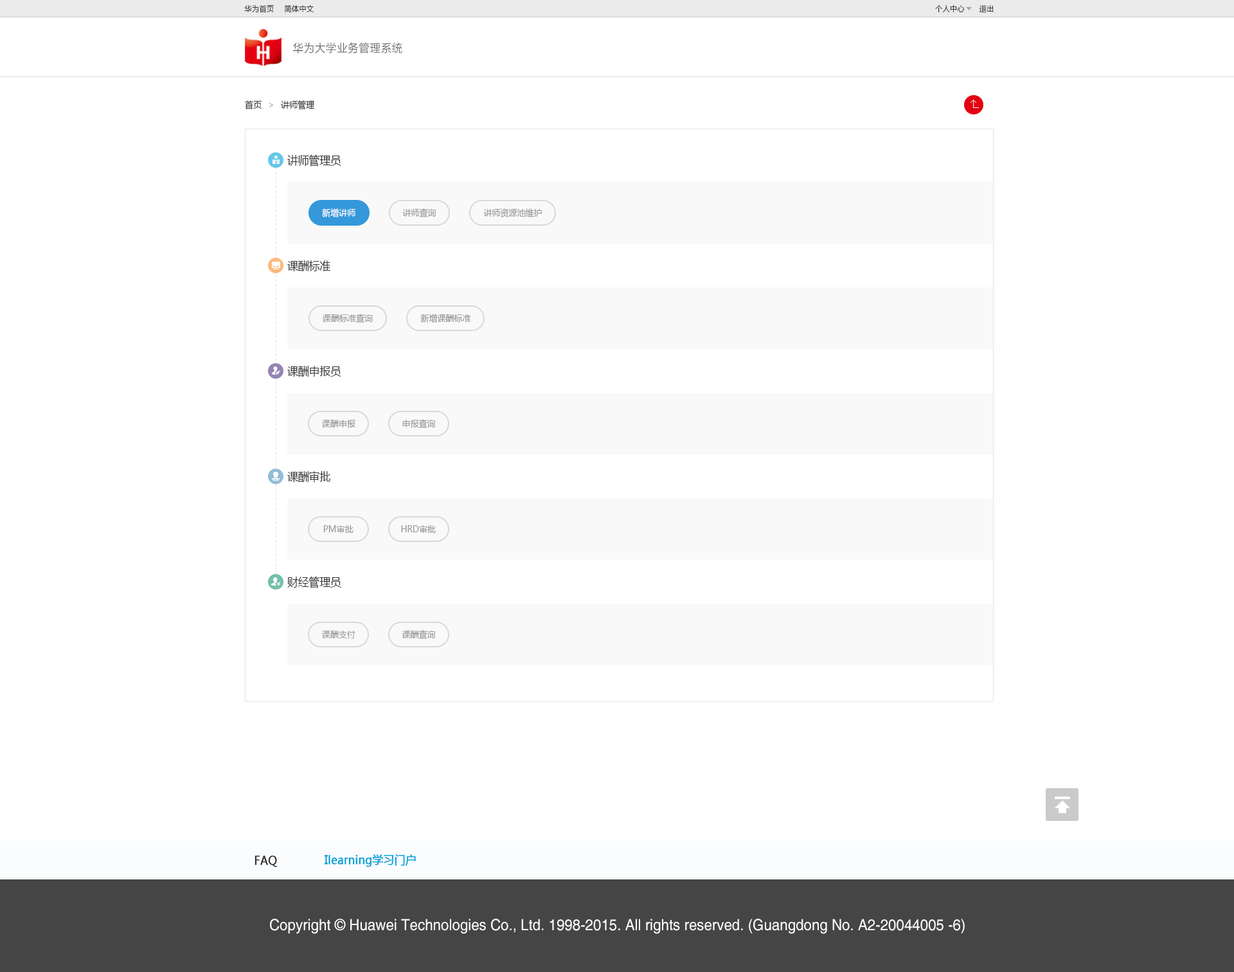
<style>
.page{position:relative;width:1234px;height:972px;background:#ffffff}
.page>*{position:absolute;margin:0}
.t1{font:7.7px "MicrosoftYaHei";letter-spacing:0.025em;color:#333333;scale:0.93 1}
.t2{font:11.6px "FZLTXHK";letter-spacing:0.025em;color:#666666;scale:0.93 1}
.t3{font:9px "MicrosoftYaHei";color:#333333;scale:0.93 1}
.t4{font:11.6px "MicrosoftYaHei";color:#333333;scale:0.93 1}
.t5{font:9px "MicrosoftYaHei";color:#ffffff;scale:0.93 1}
.t6{font:9px "MicrosoftYaHei";color:#999999;scale:0.93 1}
.t7{font:11.6px "MicrosoftYaHei";color:#333333;font-weight:bold;scale:0.93 1}
.t8{font:11.6px "MicrosoftYaHei";color:#00a1d9;font-weight:bold;scale:0.93 1}
.t9{font:15.4px "Helvetica";color:#fffefe;scale:0.93 1}
</style>
<div class="page">
<p class="t1" style="left:244px;top:5px;width:30px;height:8px">华为首页</p>
<p class="t1" style="left:284px;top:4px;width:30px;height:9px">简体中文</p>
<p class="t1" style="left:935px;top:5px;width:30px;height:7px">个人中心</p>
<p class="t1" style="left:979px;top:5px;width:15px;height:8px">退出</p>
<p class="t2" style="left:293px;top:42px;width:109px;height:11px">华为大学业务管理系统</p>
<p class="t3" style="left:245px;top:100px;width:17px;height:9px">首页</p>
<p class="t3" style="left:281px;top:100px;width:34px;height:10px">讲师管理</p>
<p class="t4" style="left:287px;top:154px;width:54px;height:12px">讲师管理员</p>
<p class="t5" style="left:322px;top:208px;width:34px;height:9px">新增讲师</p>
<p class="t6" style="left:402px;top:208px;width:34px;height:9px">讲师查询</p>
<p class="t6" style="left:483px;top:208px;width:59px;height:10px">讲师资源池维护</p>
<p class="t4" style="left:287px;top:260px;width:43px;height:11px">课酬标准</p>
<p class="t6" style="left:322px;top:314px;width:51px;height:9px">课酬标准查询</p>
<p class="t6" style="left:420px;top:314px;width:51px;height:9px">新增课酬标准</p>
<p class="t4" style="left:287px;top:366px;width:54px;height:11px">课酬申报员</p>
<p class="t6" style="left:321px;top:420px;width:35px;height:8px">课酬申报</p>
<p class="t6" style="left:402px;top:419px;width:33px;height:9px">申报查询</p>
<p class="t4" style="left:287px;top:471px;width:43px;height:11px">课酬审批</p>
<p class="t6" style="left:323px;top:525px;width:31px;height:8px">PM审批</p>
<p class="t6" style="left:401px;top:525px;width:35px;height:8px">HRD审批</p>
<p class="t4" style="left:287px;top:576px;width:54px;height:12px">财经管理员</p>
<p class="t6" style="left:402px;top:630px;width:33px;height:9px">课酬查询</p>
<p class="t6" style="left:321px;top:631px;width:35px;height:7px">课酬支付</p>
<p class="t7" style="left:255px;top:856px;width:22px;height:11px">FAQ</p>
<p class="t8" style="left:325px;top:854px;width:91px;height:13px">Ilearning学习门户</p>
<p class="t9" style="left:270px;top:919px;width:695px;height:15px">Copyright © Huawei Technologies Co., Ltd. 1998-2015. All rights reserved. (Guangdong No. A2-20044005 -6)</p>
</div>
